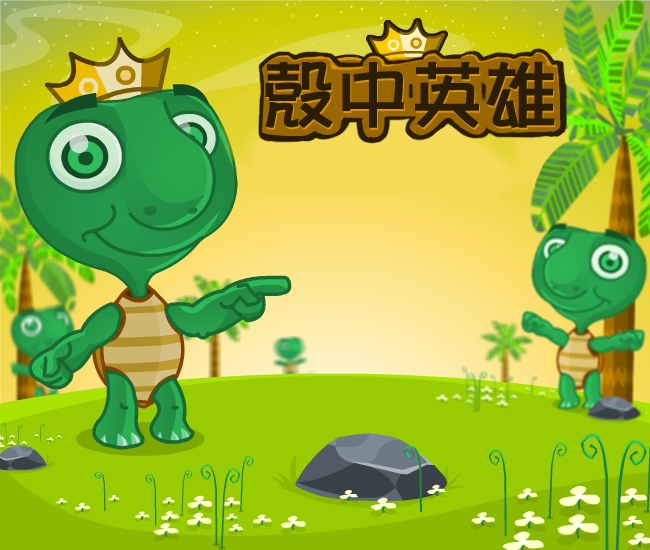
<style>
.page{position:relative;width:650px;height:550px}
.page>*{position:absolute;margin:0}
.t1{font:72px "Pop2EG-Bold-T-GB";color:#2b1d00;font-weight:bold}
</style>
<div class="page">
<p class="t1" style="left:265px;top:61px;width:290px;height:67px">壳中英雄</p>
<p class="t1" style="left:266px;top:63px;width:290px;height:67px">壳中英雄</p>
</div>
